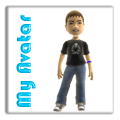
<style>
.page{position:relative;width:120px;height:120px;background:#ffffff}
.page>*{position:absolute;margin:0}
.t1{font:20.8px "Bauhaus93"}
</style>
<div class="page">
<p class="t1" style="left:16px;top:15px;width:20px;height:92px;rotate:-90deg">My Avatar</p>
</div>
